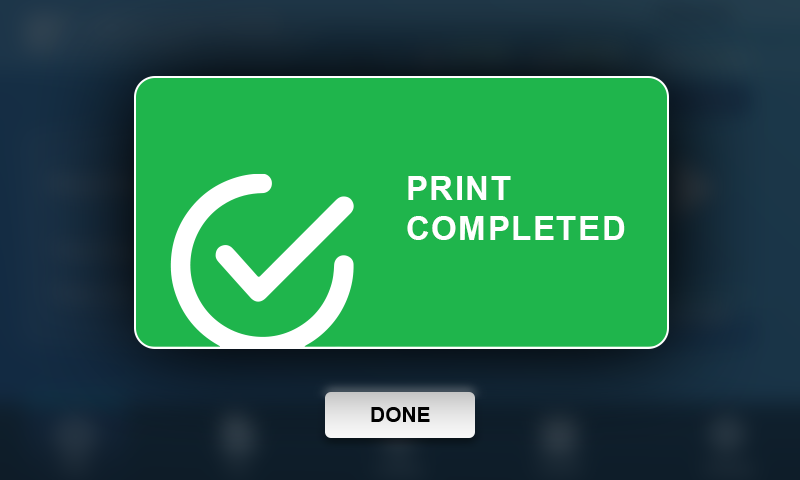
<style>
.page{position:relative;width:800px;height:480px;background:#1fb54c}
.page>*{position:absolute;margin:0}
.t1{font:33.3px "Arial-BoldMT";letter-spacing:0.04em;color:#ffffff}
</style>
<div class="page">
<p class="t1" style="left:407px;top:176px;width:218px;height:64px">PRINT<br>COMPLETED</p>
</div>
